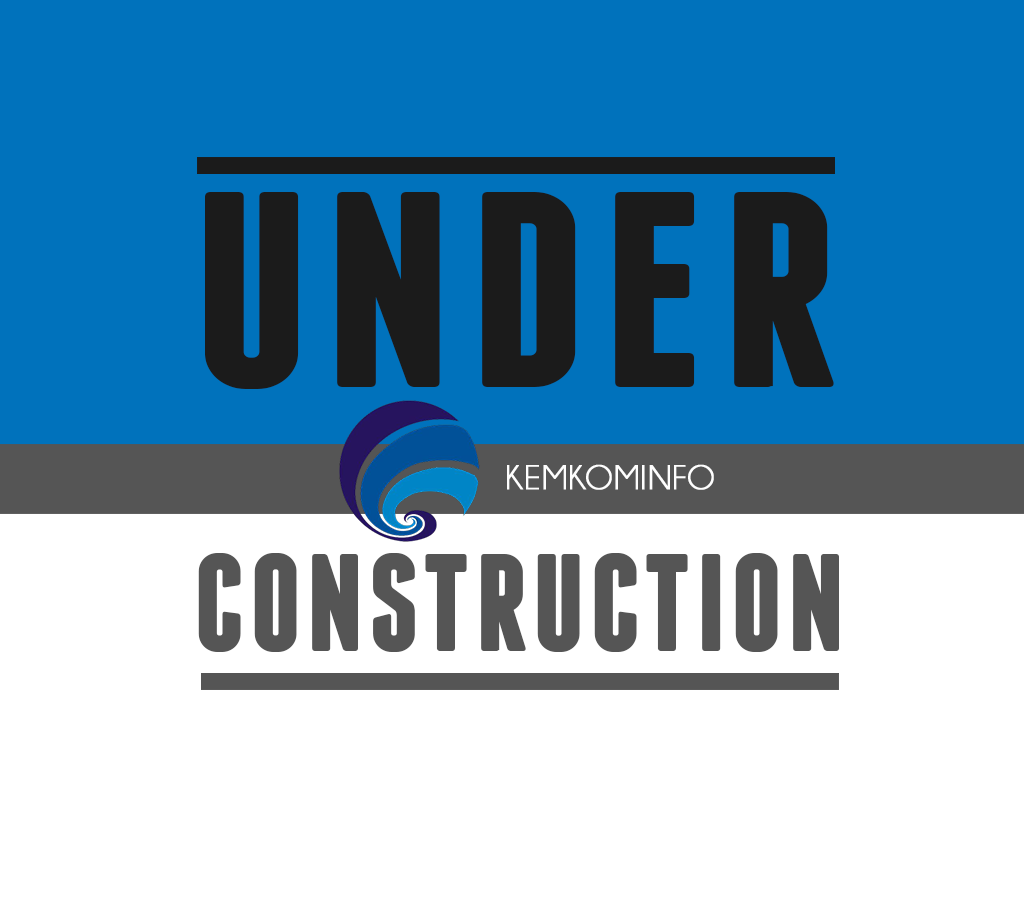
<style>
.page{position:relative;width:1024px;height:900px;background:#0072bc}
.page>*{position:absolute;margin:0}
.t1{font:276.4px "Franchise-Bold";letter-spacing:0.025em;color:#1b1b1b;font-weight:bold;scale:1.13 1}
.t2{font:34.7px "Champagne&Limousines";letter-spacing:0.025em;color:#fefefe;font-weight:bold}
.t3{font:136.3px "Franchise-Bold";letter-spacing:0.025em;color:#555555;font-weight:bold}
</style>
<div class="page">
<p class="t1" style="left:205px;top:192px;width:629px;height:197px">UNDER</p>
<p class="t2" style="left:507px;top:464px;width:207px;height:26px">KEMKOMINFO</p>
<p class="t3" style="left:198px;top:553px;width:641px;height:99px">CONSTRUCTION</p>
</div>
